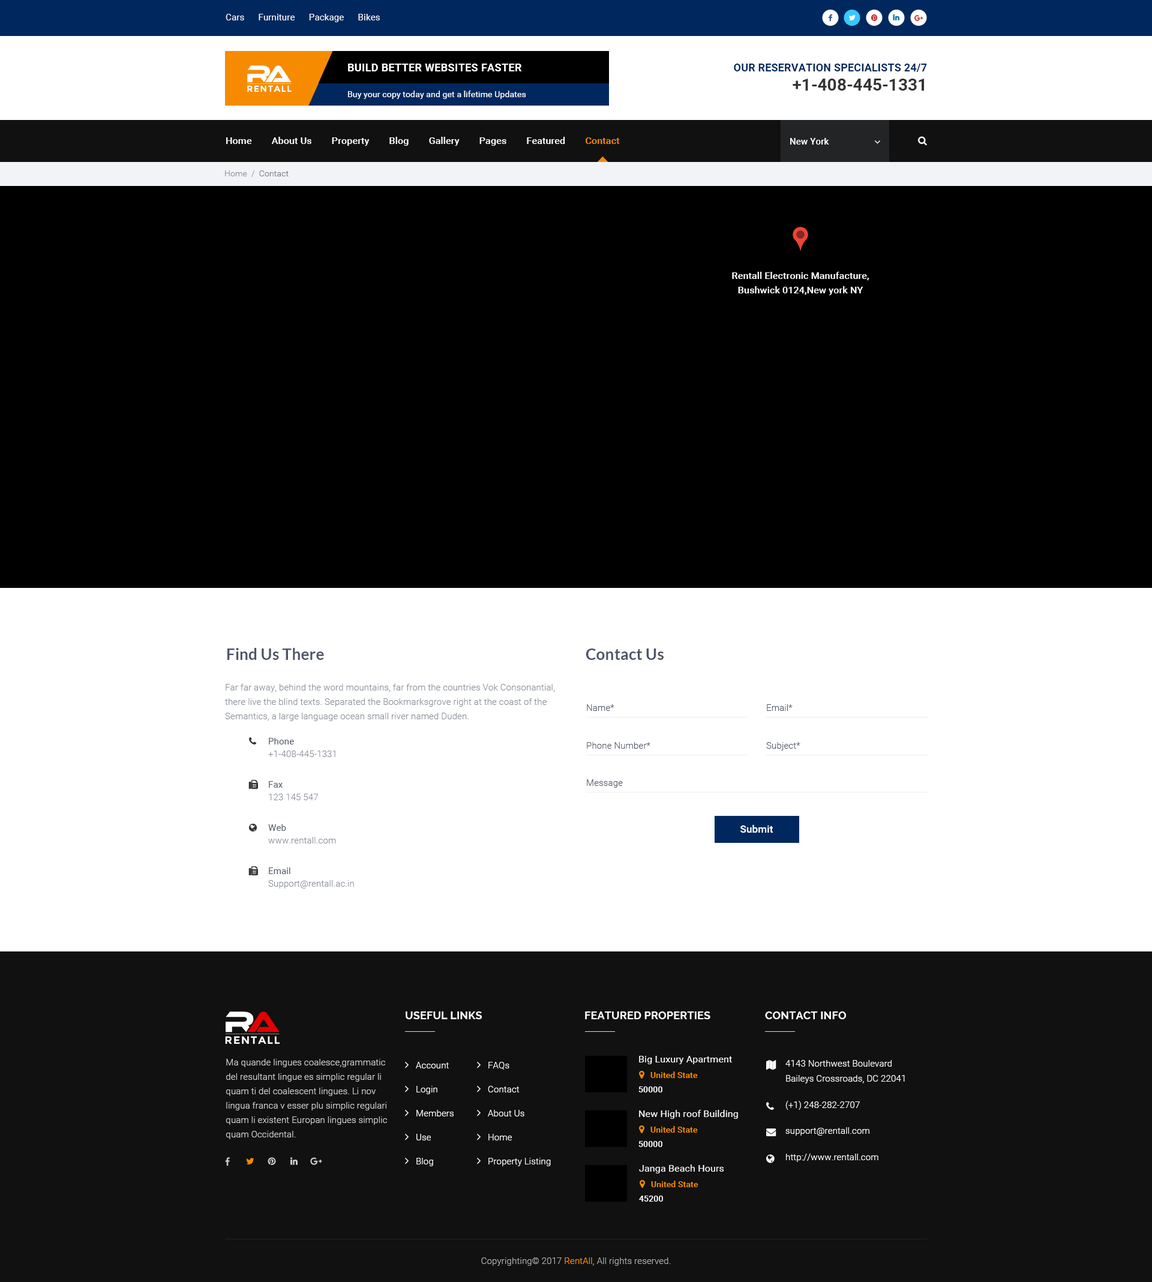
<style>
.page{position:relative;width:1152px;height:1282px;background:#ffffff}
.page>*{position:absolute;margin:0}
.t1{font:9px "Roboto-Regular";letter-spacing:0.01em;color:#ffffff}
.t2{font:10.8px "Roboto-Bold";letter-spacing:0.02em;color:#ffffff;text-transform:uppercase}
.t3{font:10.8px "Roboto-Bold";letter-spacing:0.01em;color:#00285f;text-transform:uppercase}
.t4{font:8.7px "Montserrat-Bold";letter-spacing:0.08em;color:#ffffff;text-transform:uppercase}
.t5{font:16.8px "Roboto-Bold";color:#333333}
.t6{font:8.4px "Roboto-Regular";letter-spacing:0.01em;color:#ffffff}
.t7{font:9.6px "Roboto-Medium";letter-spacing:0.01em;color:#ffffff}
.t8{font:9.6px "Roboto-Medium";letter-spacing:0.01em;color:#f78b00}
.t9{font:9px "Roboto-Medium";letter-spacing:0.01em;color:#ffffff}
.t10{font:8.4px "Roboto-Light";letter-spacing:0.01em;color:#8a8f9a}
.t11{font:8.4px "Roboto-Light";letter-spacing:0.01em;color:#757983}
.t12{font:9.6px/14.4px "Roboto-Medium";letter-spacing:0.01em;color:#ffffff}
.t13{font:15.6px "Lato-Bold";letter-spacing:0.01em;color:#4d5567}
.t14{font:9px/14.4px "Roboto-Light";letter-spacing:0.01em;color:#8a8f9a}
.t15{font:9px "Roboto-Light";letter-spacing:0.01em;color:#4d5567}
.t16{font:9px "Roboto-Regular";letter-spacing:0.01em;color:#4d5567}
.t17{font:9px "Roboto-Light";letter-spacing:0.01em;color:#8a8f9a}
.t18{font:10.2px "Roboto-Medium";letter-spacing:0.01em;color:#ffffff}
.t19{font:10.8px "Raleway-Bold";letter-spacing:0.01em;color:#ffffff;text-transform:uppercase}
.t20{font:10.7px "Montserrat-Bold";letter-spacing:0.08em;color:#ffffff;text-transform:uppercase}
.t21{font:9px/14.4px "Roboto-Light";letter-spacing:0.01em;color:#cccccc}
.t22{font:9px/24px "Roboto-Light";letter-spacing:0.01em;color:#ffffff}
.t23{font:9.6px "Roboto-Regular";letter-spacing:0.01em;color:#ffffff}
.t24{font:9px/15px "Roboto-Light";letter-spacing:0.01em;color:#ffffff}
.t25{font:8.4px "Roboto-Medium";letter-spacing:0.01em;color:#f78b00}
.t26{font:8.4px "Roboto-Medium";letter-spacing:0.01em;color:#ffffff;text-transform:uppercase}
.t27{font:9px "Roboto-Light";letter-spacing:0.01em;color:#ffffff}
.t28{font:9px "Roboto-Light";letter-spacing:0.01em;color:#aaaaaa}
.t29{font:9px "Roboto-Light";letter-spacing:0.01em;color:#f78b00}
</style>
<div class="page">
<p class="t1" style="left:226px;top:14px;width:154px;height:8px">Cars      Furniture      Package      Bikes</p>
<p class="t2" style="left:348px;top:64px;width:174px;height:7px">Build better Websites Faster</p>
<p class="t3" style="left:734px;top:64px;width:193px;height:8px">Our Reservation Specialists 24/7</p>
<p class="t4" style="left:247px;top:85px;width:45px;height:7px">RentAll</p>
<p class="t5" style="left:793px;top:79px;width:131px;height:12px">+1-408-445-1331</p>
<p class="t6" style="left:348px;top:91px;width:178px;height:8px">Buy your copy today and get a lifetime Updates</p>
<p class="t7" style="left:226px;top:137px;width:394px;height:9px">Home        About Us        Property        Blog        Gallery        Pages        Featured        <span class="t8">Contact</span></p>
<p class="t9" style="left:790px;top:138px;width:39px;height:7px">New York</p>
<p class="t10" style="left:225px;top:170px;width:64px;height:7px">Home  /  <span class="t11">Contact</span></p>
<p class="t12" style="left:732px;top:272px;width:137px;height:23px;text-align:center">Rentall Electronic Manufacture,<br>Bushwick 0124,New york NY</p>
<p class="t13" style="left:227px;top:648px;width:97px;height:12px">Find Us There</p>
<p class="t13" style="left:586px;top:649px;width:78px;height:11px">Contact Us</p>
<p class="t14" style="left:225px;top:684px;width:330px;height:37px">Far far away, behind the word mountains, far from the countries Vok Consonantial, there live the blind texts. Separated the Bookmarksgrove right at the coast of the Semantics, a large language ocean small river named Duden.</p>
<p class="t15" style="left:587px;top:704px;width:27px;height:7px">Name*</p>
<p class="t15" style="left:767px;top:704px;width:26px;height:7px">Email*</p>
<p class="t16" style="left:269px;top:738px;width:25px;height:7px">Phone</p>
<p class="t15" style="left:587px;top:742px;width:63px;height:7px">Phone Number*</p>
<p class="t15" style="left:766px;top:742px;width:34px;height:9px">Subject*</p>
<p class="t17" style="left:268px;top:751px;width:67px;height:6px">+1-408-445-1331</p>
<p class="t16" style="left:269px;top:781px;width:14px;height:7px">Fax</p>
<p class="t15" style="left:587px;top:779px;width:36px;height:9px">Message</p>
<p class="t17" style="left:269px;top:794px;width:49px;height:6px">123 145 547</p>
<p class="t16" style="left:268px;top:824px;width:18px;height:7px">Web</p>
<p class="t18" style="left:740px;top:825px;width:33px;height:8px">Submit</p>
<p class="t17" style="left:268px;top:837px;width:68px;height:7px">www.rentall.com</p>
<p class="t16" style="left:269px;top:868px;width:21px;height:6px">Email</p>
<p class="t17" style="left:268px;top:880px;width:86px;height:9px">Support@rentall.ac.in</p>
<p class="t19" style="left:406px;top:1012px;width:76px;height:7px">Useful Links</p>
<p class="t19" style="left:585px;top:1012px;width:125px;height:7px">Featured Properties</p>
<p class="t19" style="left:765px;top:1012px;width:81px;height:7px">Contact Info</p>
<p class="t20" style="left:225px;top:1036px;width:55px;height:8px">RentAll</p>
<p class="t21" style="left:226px;top:1059px;width:161px;height:80px">Ma quande lingues coalesce,grammatic del resultant lingue es simplic regular li quam ti del coalescent lingues. Li nov lingua franca v esser plu simplic regulari quam li existent Europan lingues simplic quam Occidental.</p>
<p class="t22" style="left:416px;top:1062px;width:38px;height:104px">Account<br>Login<br>Members<br>Use<br>Blog</p>
<p class="t22" style="left:488px;top:1062px;width:63px;height:104px">FAQs<br>Contact<br>About Us<br>Home<br>Property Listing</p>
<p class="t23" style="left:639px;top:1056px;width:93px;height:8px">Big Luxury Apartment</p>
<p class="t24" style="left:785px;top:1060px;width:120px;height:24px">4143 Northwest Boulevard<br>Baileys Crossroads, DC 22041</p>
<p class="t25" style="left:650px;top:1072px;width:48px;height:6px">United State</p>
<p class="t26" style="left:638px;top:1087px;width:24px;height:6px">50000</p>
<p class="t23" style="left:639px;top:1110px;width:99px;height:9px">New High roof Building</p>
<p class="t27" style="left:785px;top:1101px;width:75px;height:9px">(+1) 248-282-2707</p>
<p class="t25" style="left:650px;top:1126px;width:48px;height:7px">United State</p>
<p class="t27" style="left:785px;top:1127px;width:84px;height:9px">support@rentall.com</p>
<p class="t26" style="left:638px;top:1141px;width:24px;height:6px">50000</p>
<p class="t27" style="left:786px;top:1154px;width:92px;height:8px">http://www.rentall.com</p>
<p class="t23" style="left:639px;top:1165px;width:85px;height:9px">Janga Beach Hours</p>
<p class="t25" style="left:651px;top:1181px;width:47px;height:6px">United State</p>
<p class="t26" style="left:639px;top:1196px;width:24px;height:6px">45200</p>
<p class="t28" style="left:481px;top:1258px;width:190px;height:8px">Copyrighting© 2017 <span class="t29">RentAll</span>, All rights reserved.</p>
</div>
